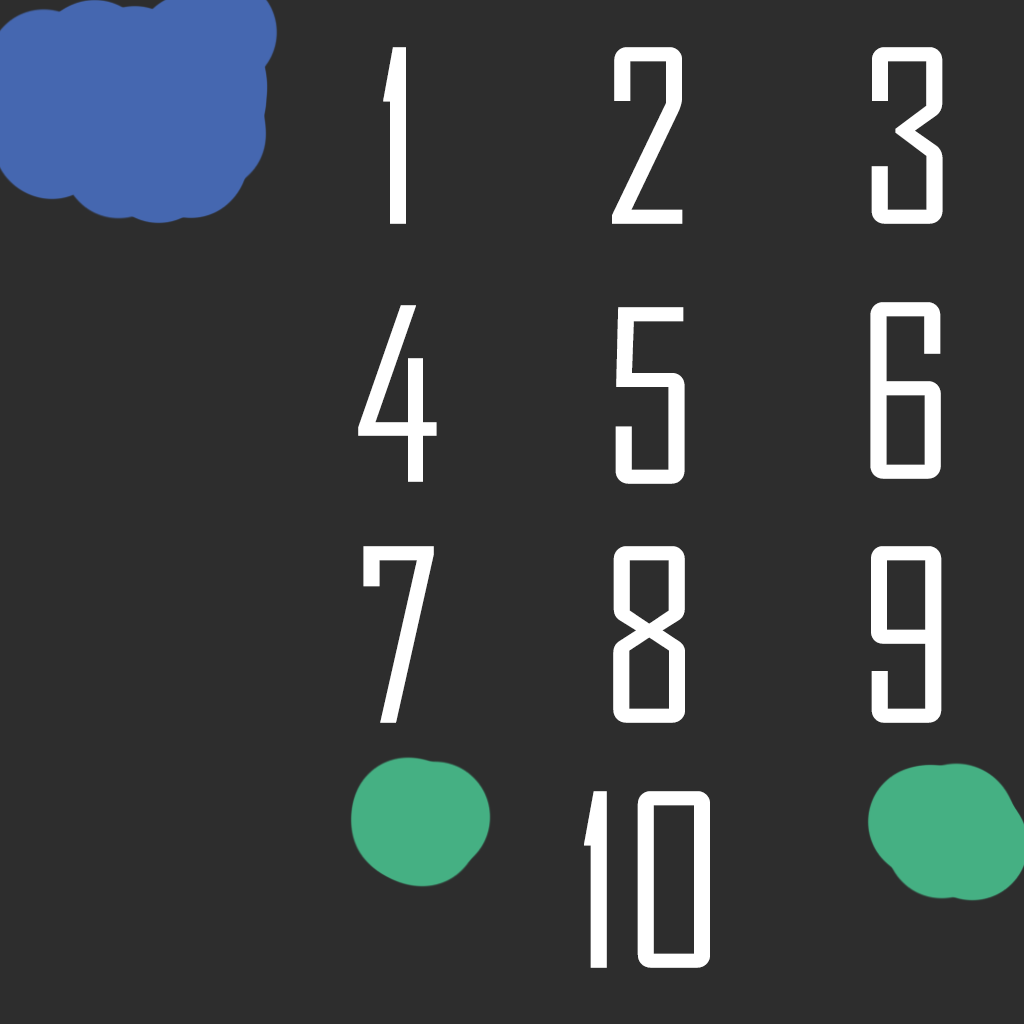
<style>
.page{position:relative;width:1024px;height:1024px;background:#2d2d2d}
.page>*{position:absolute;margin:0}
.t1{font:230.7px "AgencyFB-Reg";letter-spacing:0.01em;color:#ffffff}
</style>
<div class="page">
<p class="t1" style="left:383px;top:47px;width:23px;height:177px">1</p>
<p class="t1" style="left:612px;top:47px;width:71px;height:177px">2</p>
<p class="t1" style="left:871px;top:47px;width:72px;height:177px">3</p>
<p class="t1" style="left:358px;top:305px;width:79px;height:177px">4</p>
<p class="t1" style="left:870px;top:302px;width:71px;height:177px">6</p>
<p class="t1" style="left:615px;top:307px;width:70px;height:177px">5</p>
<p class="t1" style="left:363px;top:546px;width:71px;height:177px">7</p>
<p class="t1" style="left:613px;top:546px;width:72px;height:177px">8</p>
<p class="t1" style="left:871px;top:546px;width:71px;height:177px">9</p>
<p class="t1" style="left:584px;top:791px;width:126px;height:177px">10</p>
</div>
